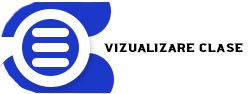
<style>
.page{position:relative;width:250px;height:94px;background:#ffffff}
.page>*{position:absolute;margin:0}
.t1{font:12px "Ridgeline201-Regular";color:#000000}
</style>
<div class="page">
<p class="t1" style="left:104px;top:43px;width:139px;height:10px">vizualizare clase</p>
</div>
